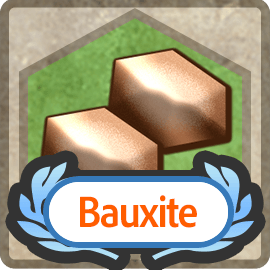
<style>
.page{position:relative;width:270px;height:270px}
.page>*{position:absolute;margin:0}
.t1{font:45px "AdobeClean-Bold";letter-spacing:-0.04em;color:#ff5d00;scale:0.9 1}
</style>
<div class="page">
<p class="t1" style="left:80px;top:195px;width:117px;height:33px">Bauxite</p>
</div>
